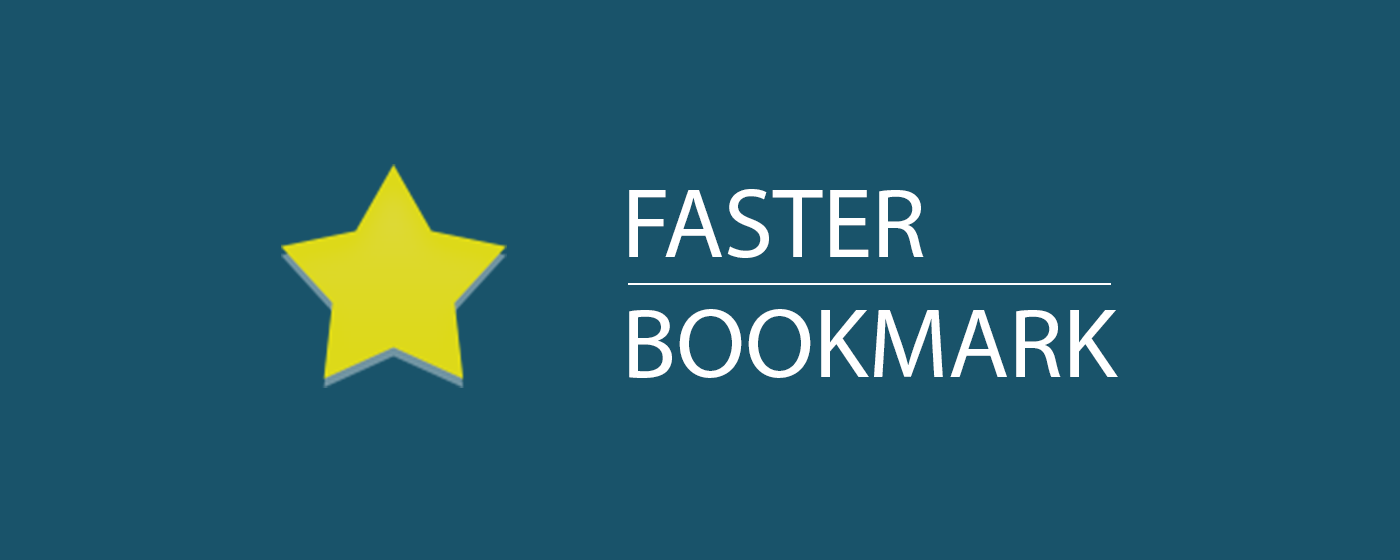
<style>
.page{position:relative;width:1400px;height:560px;background:#19536a}
.page>*{position:absolute;margin:0}
.t1{font:100px "MyriadPro-Regular";color:#ffffff}
</style>
<div class="page">
<p class="t1" style="left:629px;top:189px;width:489px;height:189px">FASTER<br>BOOKMARK</p>
</div>
